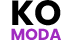
<style>
.page{position:relative;width:72px;height:40px;background:#ffffff}
.page>*{position:absolute;margin:0}
.t1{font:35px "Poppins-Bold";color:#000000}
.t2{font:16px "Poppins-Bold";color:#a02bc0}
</style>
<div class="page">
<p class="t1" style="left:12px;top:0px;width:49px;height:26px">KO</p>
<p class="t2" style="left:11px;top:28px;width:50px;height:12px">MODA</p>
</div>
